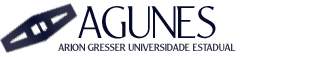
<style>
.page{position:relative;width:320px;height:57px;background:#ffffff}
.page>*{position:absolute;margin:0}
.t1{font:44.4px "YorkieDEMO-ExtraLight";letter-spacing:-0.025em;color:#060a2b}
.t2{font:10.2px "YorkieDEMO-Regular";letter-spacing:-0.025em;color:#2e3147}
</style>
<div class="page">
<p class="t1" style="left:78px;top:6px;width:138px;height:33px">AGUNES</p>
<p class="t2" style="left:58px;top:43px;width:178px;height:8px">ARION GRESSER UNIVERSIDADE ESTADUAL</p>
</div>
